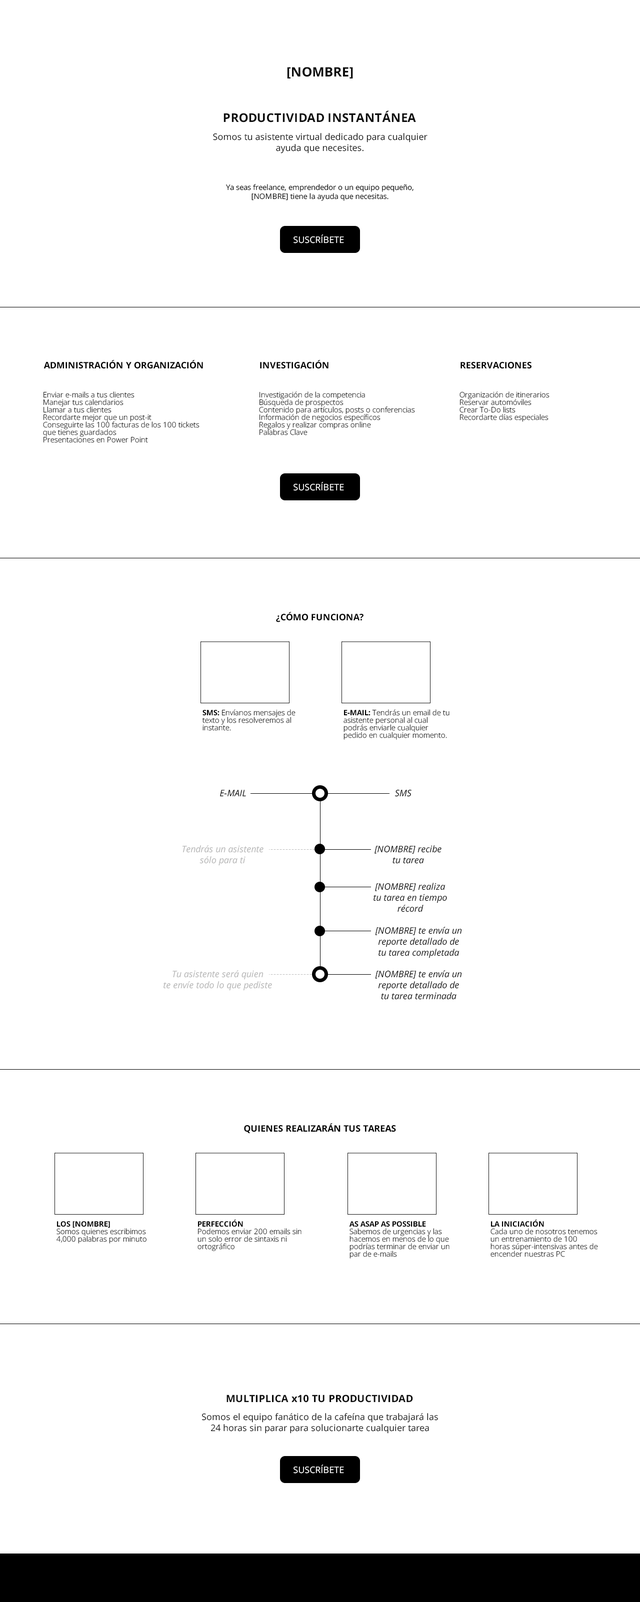
<style>
.page{position:relative;width:640px;height:1602px;background:#ffffff}
.page>*{position:absolute;margin:0}
.t1{font:13px "OpenSans-Bold";color:#0e0e0e}
.t2{font:12px "OpenSans-Bold";color:#0e0e0e}
.t3{font:9px "OpenSans";color:#0e0e0e}
.t4{font:7.5px "OpenSans";color:#0e0e0e}
.t5{font:9px "OpenSans";color:#ffffff}
.t6{font:9px "OpenSans-Bold";color:#000000}
.t7{font:7.5px/7.5px "OpenSans-Light"}
.t8{font:7.5px/7.5px "OpenSans-Light";color:#000000}
.t9{font:7.5px/7.5px "OpenSans-Bold";color:#000000}
.t10{font:9px "OpenSans-Italic";color:#0e0e0e}
.t11{font:9px "OpenSans-Italic";color:#b6b6b6}
.t12{font:10px "OpenSans-Bold";color:#0e0e0e}
</style>
<div class="page">
<p class="t1" style="left:287px;top:67px;width:66px;height:11px">[NOMBRE]</p>
<p class="t2" style="left:224px;top:110px;width:192px;height:12px">PRODUCTIVIDAD INSTANTÁNEA</p>
<p class="t3" style="left:213px;top:133px;width:215px;height:21px;text-align:center">Somos tu asistente virtual dedicado para cualquier ayuda que necesites.</p>
<p class="t4" style="left:226px;top:184px;width:188px;height:17px;text-align:center">Ya seas freelance, emprendedor o un equipo pequeño, [NOMBRE] tiene la ayuda que necesitas.</p>
<p class="t5" style="left:294px;top:234px;width:50px;height:10px">SUSCRÍBETE</p>
<p class="t6" style="left:44px;top:360px;width:159px;height:9px">ADMINISTRACIÓN Y ORGANIZACIÓN</p>
<p class="t6" style="left:260px;top:360px;width:68px;height:9px">INVESTIGACIÓN</p>
<p class="t6" style="left:460px;top:362px;width:72px;height:7px">RESERVACIONES</p>
<p class="t7" style="left:43px;top:392px;width:157px;height:51px">Enviar e-mails a tus clientes<br>Manejar tus calendarios<br>Llamar a tus clientes<br>Recordarte mejor que un post-it<br>Conseguirte las 100 facturas de los 100 tickets que tienes guardados<br>Presentaciones en Power Point</p>
<p class="t8" style="left:259px;top:392px;width:156px;height:44px">Investigación de la competencia<br>Búsqueda de prospectos<br>Contenido para artículos, posts o conferencias<br>Información de negocios específicos<br>Regalos y realizar compras online<br>Palabras Clave</p>
<p class="t7" style="left:460px;top:392px;width:90px;height:30px">Organización de itinerarios<br>Reservar automóviles<br>Crear To-Do lists<br>Recordarte días especiales</p>
<p class="t5" style="left:294px;top:482px;width:50px;height:9px">SUSCRÍBETE</p>
<p class="t6" style="left:276px;top:612px;width:88px;height:10px">¿CÓMO FUNCIONA?</p>
<p class="t8" style="left:202px;top:710px;width:94px;height:21px"><span class="t9">SMS:</span> Envíanos mensajes de texto y los resolveremos al instante.</p>
<p class="t8" style="left:344px;top:710px;width:106px;height:30px"><span class="t9">E-MAIL:</span> Tendrás un email de tu asistente personal al cual podrás enviarle cualquier pedido en cualquier momento.</p>
<p class="t10" style="left:220px;top:790px;width:26px;height:7px">E-MAIL</p>
<p class="t10" style="left:395px;top:790px;width:17px;height:7px">SMS</p>
<p class="t11" style="left:182px;top:846px;width:82px;height:20px;text-align:center">Tendrás un asistente<br>sólo para ti</p>
<p class="t10" style="left:374px;top:846px;width:68px;height:18px;text-align:center">[NOMBRE] recibe<br>tu tarea</p>
<p class="t10" style="left:374px;top:883px;width:73px;height:29px;text-align:center">[NOMBRE] realiza<br>tu tarea en tiempo<br>récord</p>
<p class="t10" style="left:375px;top:927px;width:87px;height:31px;text-align:center">[NOMBRE] te envía un<br>reporte detallado de<br>tu tarea completada</p>
<p class="t11" style="left:164px;top:970px;width:108px;height:21px;text-align:center">Tu asistente será quien<br>te envíe todo lo que pediste</p>
<p class="t10" style="left:375px;top:970px;width:87px;height:30px;text-align:center">[NOMBRE] te envía un<br>reporte detallado de<br>tu tarea terminada</p>
<p class="t6" style="left:244px;top:1124px;width:152px;height:10px">QUIENES REALIZARÁN TUS TAREAS</p>
<p class="t8" style="left:56px;top:1222px;width:90px;height:22px"><span class="t9">LOS [NOMBRE]<br></span>Somos quienes escribimos 4,000 palabras por minuto</p>
<p class="t8" style="left:198px;top:1220px;width:104px;height:32px"><span class="t9">PERFECCIÓN<br></span>Podemos enviar 200 emails sin un solo error de sintaxis ni ortográfico</p>
<p class="t8" style="left:349px;top:1222px;width:101px;height:37px"><span class="t9">AS ASAP AS POSSIBLE<br></span>Sabemos de urgencias y las hacemos en menos de lo que podrías terminar de enviar un par de e-mails</p>
<p class="t8" style="left:490px;top:1220px;width:108px;height:38px"><span class="t9">LA INICIACIÓN<br></span>Cada uno de nosotros tenemos un entrenamiento de 100 horas súper-intensivas antes de encender nuestras PC</p>
<p class="t12" style="left:226px;top:1395px;width:187px;height:8px">MULTIPLICA x10 TU PRODUCTIVIDAD</p>
<p class="t3" style="left:202px;top:1414px;width:236px;height:20px;text-align:center">Somos el equipo fanático de la cafeína que trabajará las 24 horas sin parar para solucionarte cualquier tarea</p>
<p class="t5" style="left:294px;top:1465px;width:50px;height:9px">SUSCRÍBETE</p>
</div>
